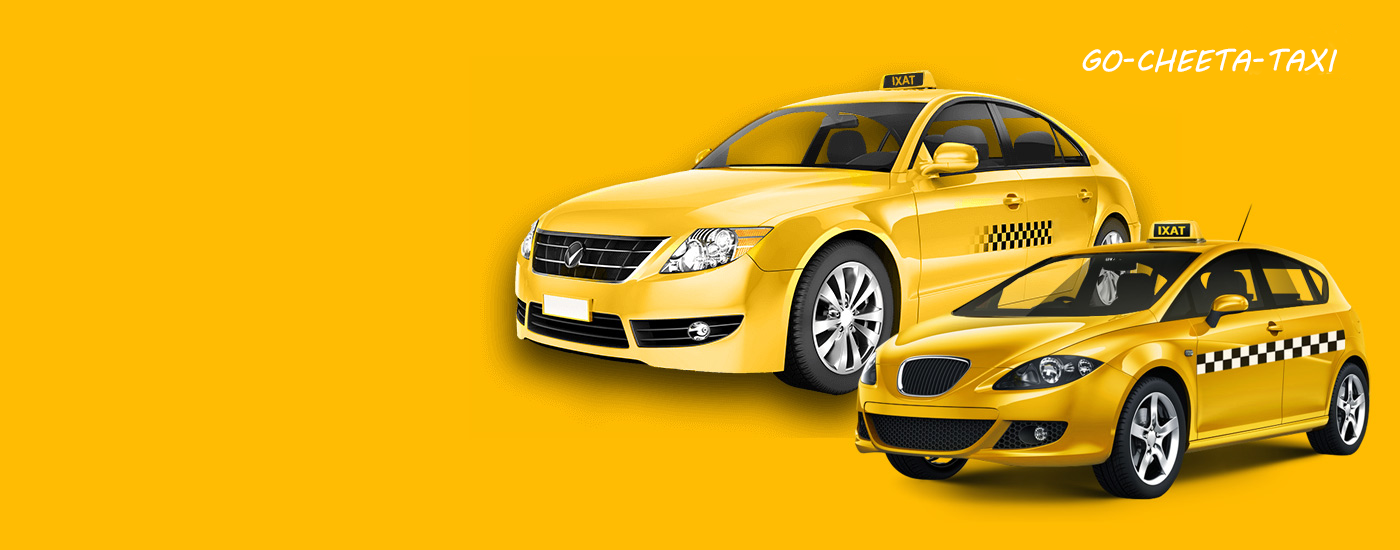
<style>
.page{position:relative;width:1400px;height:550px;background:#ffbc03}
.page>*{position:absolute;margin:0}
.t1{font:30px "MVBoli";color:#ffffff}
.t2{font:30px "MVBoli";color:#ffbc03}
</style>
<div class="page">
<p class="t1" style="left:1082px;top:48px;width:255px;height:25px">GO-CHEETA-TAXI<span class="t2">ETA-TAXI</span></p>
</div>
